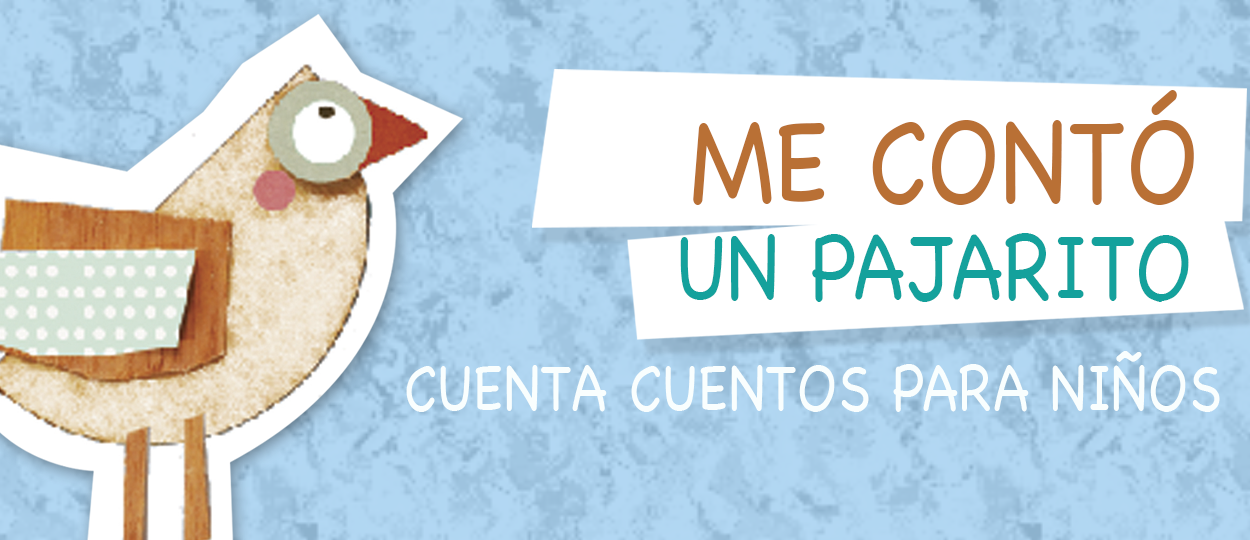
<style>
.page{position:relative;width:1250px;height:540px;background:#ffffff}
.page>*{position:absolute;margin:0}
.t1{font:119.1px "Chalkboard";color:#b97035;scale:0.85 1}
.t2{font:93.7px "Chalkboard";color:#14a19c;scale:0.85 1}
.t3{font:65.7px "Chalkboard";color:#f9fefe;scale:0.85 1}
</style>
<div class="page">
<p class="t1" style="left:693px;top:90px;width:501px;height:115px">ME CONTÓ</p>
<p class="t2" style="left:680px;top:233px;width:509px;height:69px">UN PAJARITO</p>
<p class="t3" style="left:406px;top:351px;width:814px;height:61px">CUENTA CUENTOS PARA NIÑOS</p>
</div>
